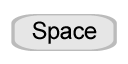
<style>
.page{position:relative;width:128px;height:64px;background:#ffffff}
.page>*{position:absolute;margin:0}
.t1{font:24px "ArialMT";letter-spacing:-0.025em;color:#000000}
</style>
<div class="page">
<p class="t1" style="left:32px;top:21px;width:65px;height:23px">Space</p>
</div>
